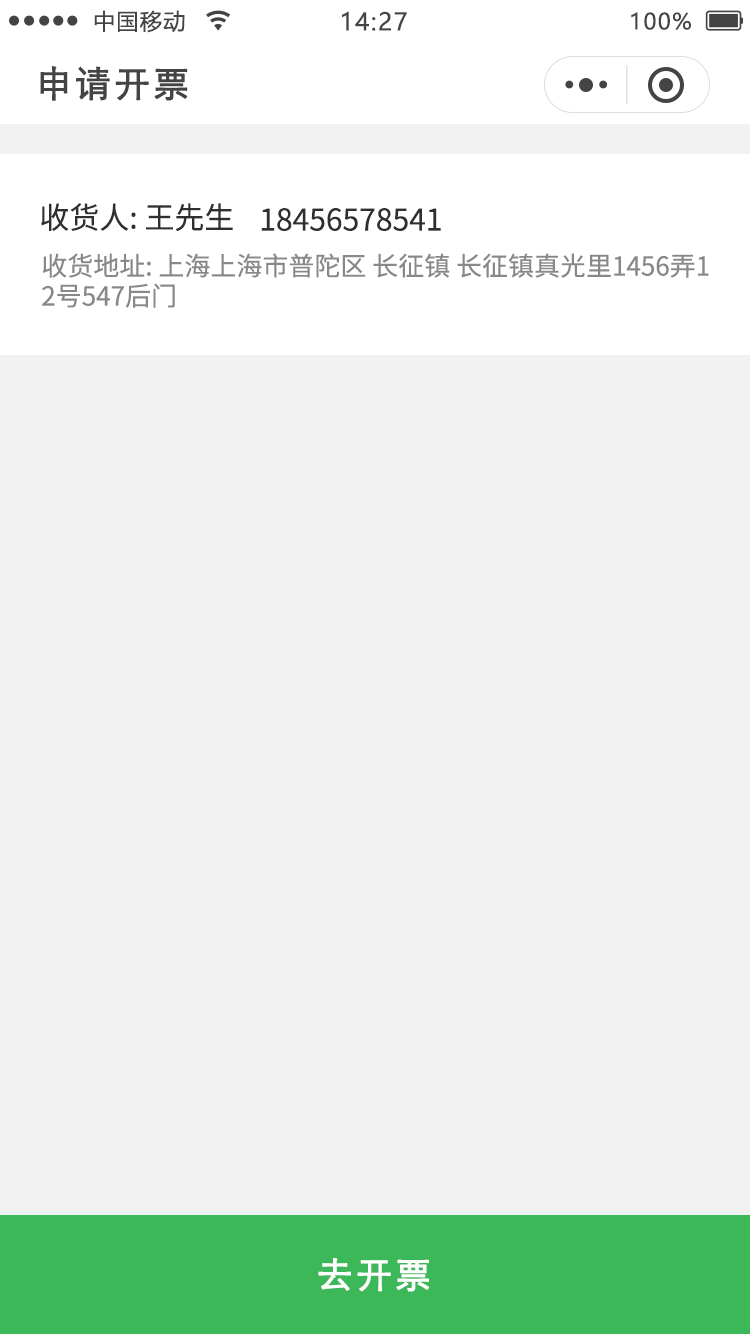
<style>
.page{position:relative;width:750px;height:1334px;background:#f0f1f0}
.page>*{position:absolute;margin:0}
.t1{font:22px "MicrosoftYaHei";letter-spacing:0.06em;color:#444444}
.t2{font:24px "MicrosoftYaHei";letter-spacing:0.06em;color:#444444}
.t3{font:36px "STXihei";letter-spacing:0.06em;color:#444444;font-weight:bold}
.t4{font:30px "NotoSansCJKsc-Regular";color:#302f2f}
.t5{font:26px/30px "NotoSansCJKsc-Regular";color:#888888}
.t6{font:36px "STXihei";letter-spacing:0.06em;color:#ffffff;font-weight:bold}
</style>
<div class="page">
<p class="t1" style="left:94px;top:10px;width:91px;height:23px">中国移动</p>
<p class="t2" style="left:342px;top:11px;width:65px;height:20px">14:27</p>
<p class="t1" style="left:631px;top:12px;width:60px;height:18px">100%</p>
<p class="t3" style="left:40px;top:66px;width:148px;height:35px">申请开票</p>
<p class="t4" style="left:41px;top:203px;width:192px;height:28px">收货人: 王先生</p>
<p class="t4" style="left:261px;top:208px;width:180px;height:23px">18456578541</p>
<p class="t5" style="left:42px;top:253px;width:667px;height:55px">收货地址: 上海上海市普陀区 长征镇 长征镇真光里1456弄1<br>2号547后门</p>
<p class="t6" style="left:318px;top:1258px;width:111px;height:34px">去开票</p>
</div>
